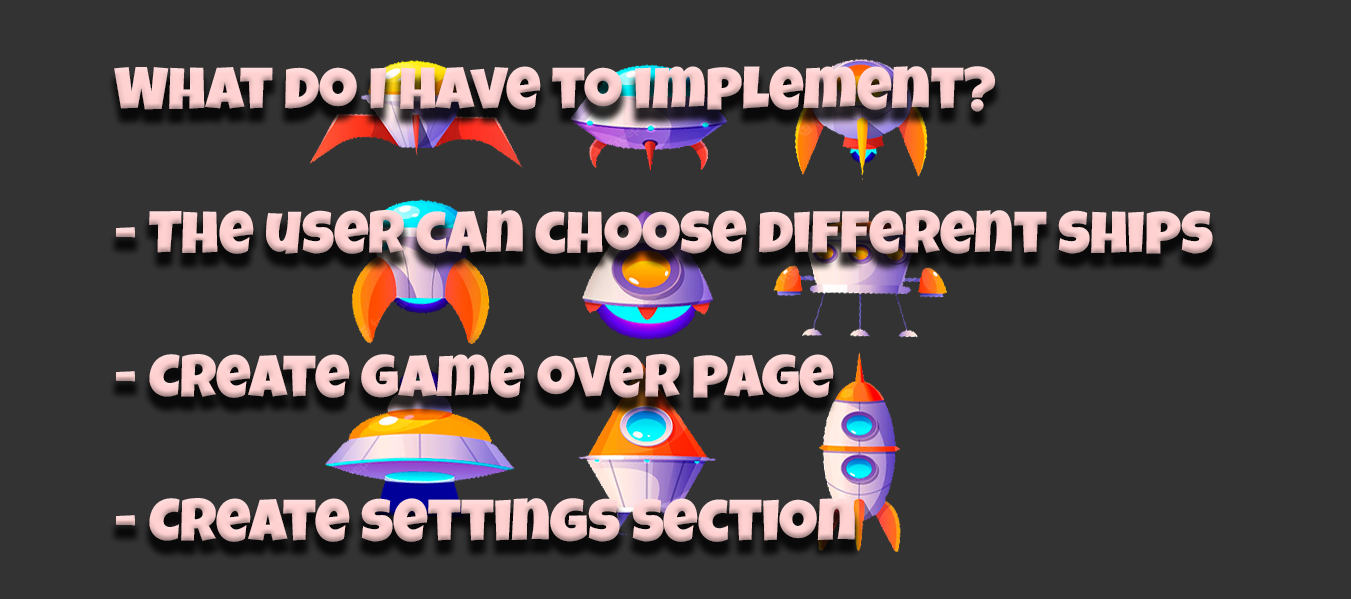
<style>
.page{position:relative;width:1351px;height:599px;background:#333333}
.page>*{position:absolute;margin:0}
.t1{font:60px "LuckiestGuy-Regular";color:#ffd1d1}
</style>
<div class="page">
<p class="t1" style="left:114px;top:66px;width:1099px;height:476px">What do I have to implement?<br><br>- The user can choose different ships<br><br>- Create game over page<br><br>- Create settings section</p>
</div>
